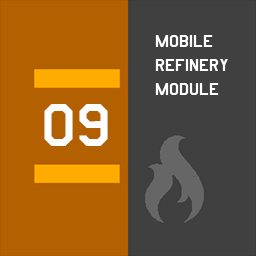
<style>
.page{position:relative;width:256px;height:256px;background:#404040}
.page>*{position:absolute;margin:0}
.t1{font:20px "AmarilloUSAF";color:#ffffff}
.t2{font:70px "AmarilloUSAF";color:#ffffff}
</style>
<div class="page">
<p class="t1" style="left:155px;top:35px;width:73px;height:60px">mobile<br>refinery<br>module</p>
<p class="t2" style="left:44px;top:104px;width:64px;height:42px">09</p>
</div>
